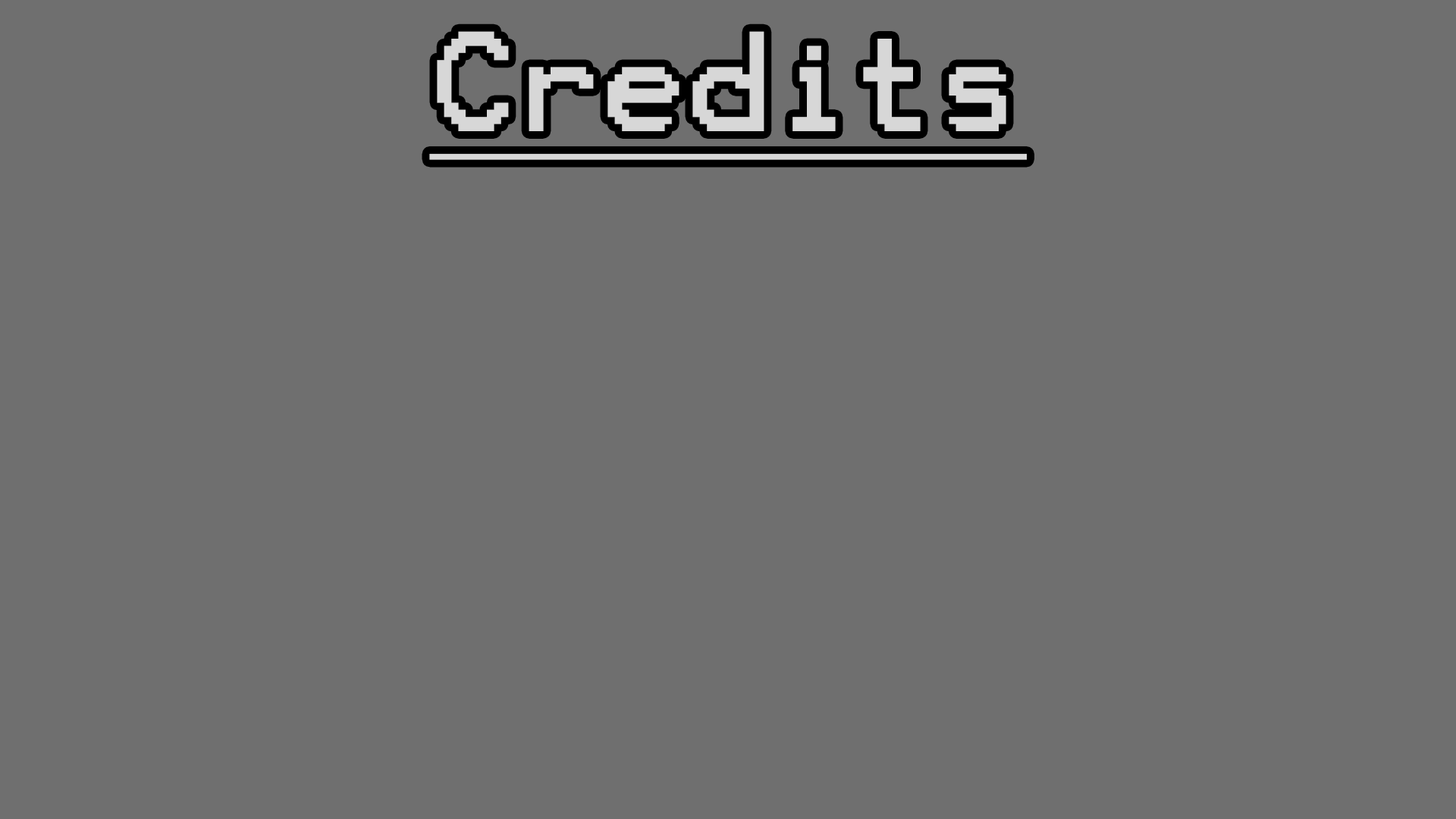
<style>
.page{position:relative;width:1456px;height:819px;background:#6f6f6f}
.page>*{position:absolute;margin:0}
.t1{font:113.7px "Terminal";color:#d7d7d7;text-decoration:underline}
</style>
<div class="page">
<p class="t1" style="left:429px;top:31px;width:598px;height:129px">Credits</p>
</div>
